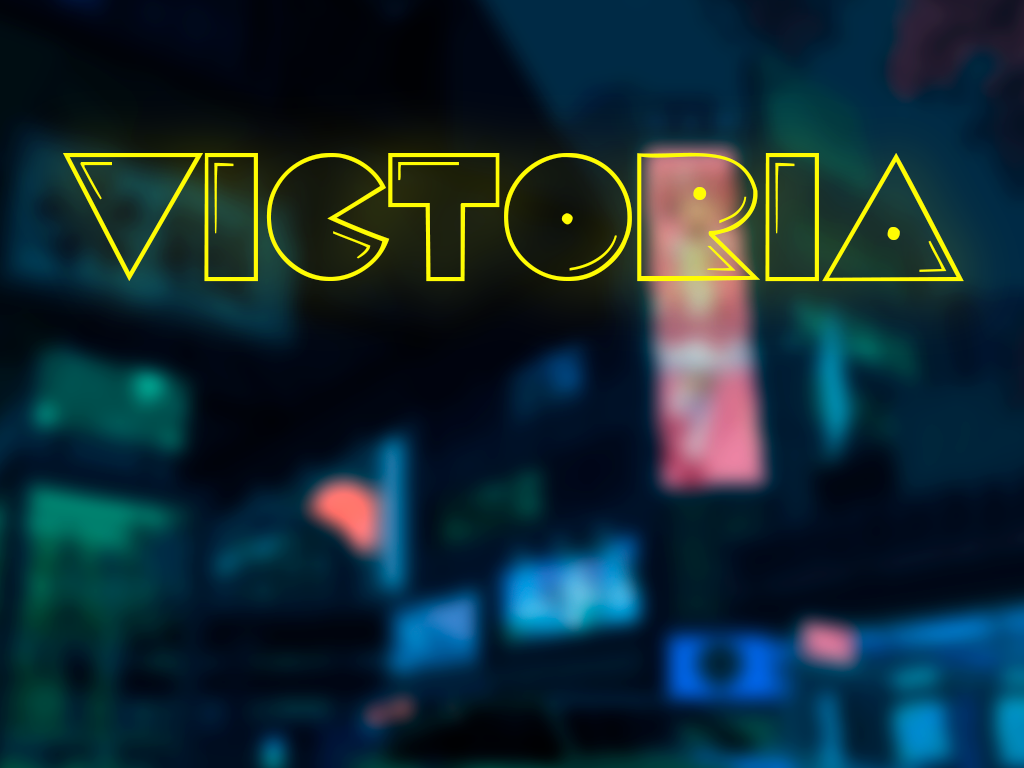
<style>
.page{position:relative;width:1024px;height:768px}
.page>*{position:absolute;margin:0}
.t1{font:130px "PacFont";color:#fffc02}
</style>
<div class="page">
<p class="t1" style="left:63px;top:152px;width:901px;height:130px">VICTORIA</p>
</div>
